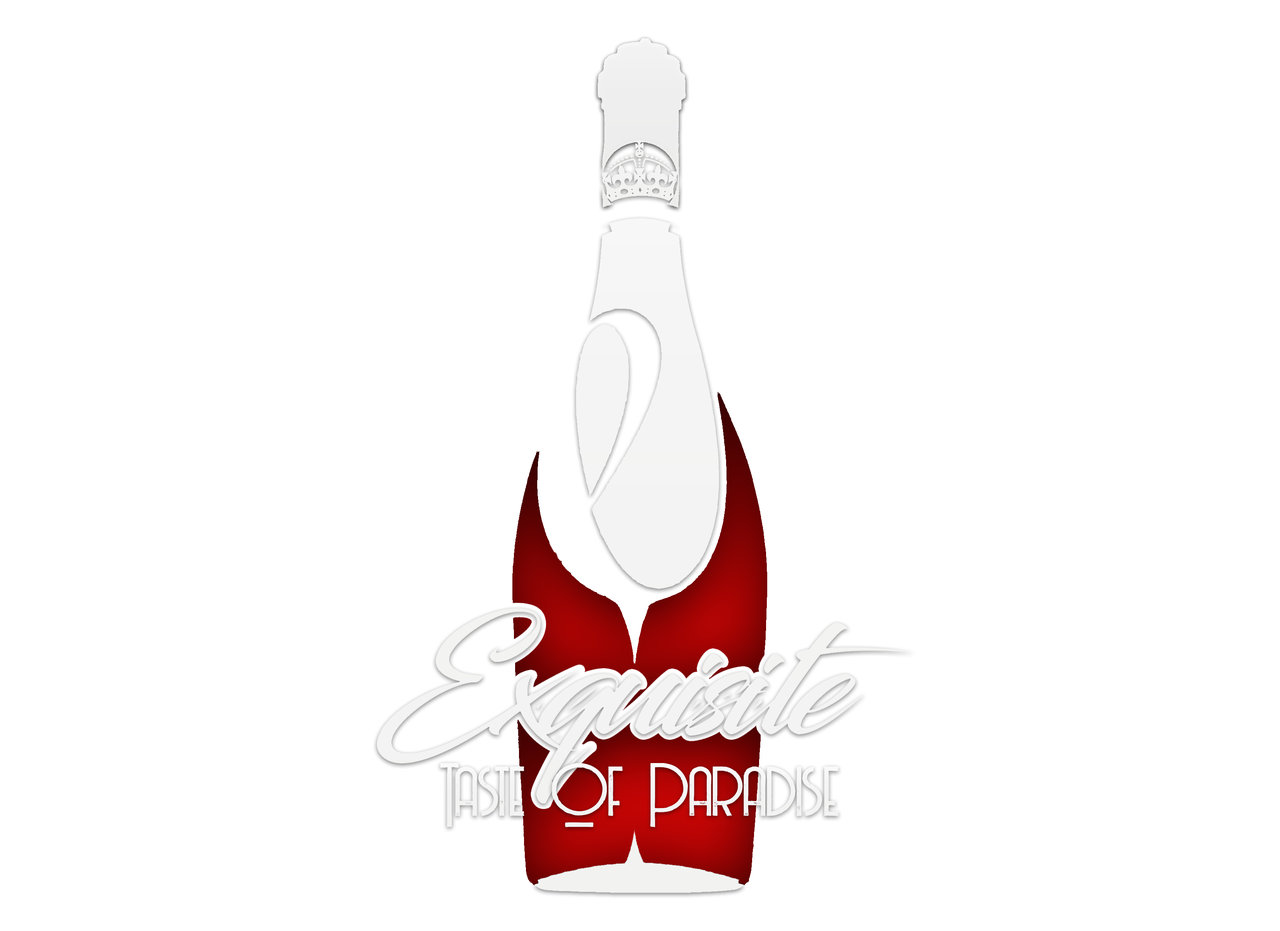
<style>
.page{position:relative;width:1280px;height:931px;background:#ffffff}
.page>*{position:absolute;margin:0}
.t1{font:82.3px "BillionaireMediumGrunge";letter-spacing:-0.02em;color:#f4f4f4;scale:1.06 1}
</style>
<div class="page">
<p class="t1" style="left:440px;top:763px;width:399px;height:65px">Taste Of Paradise</p>
</div>
